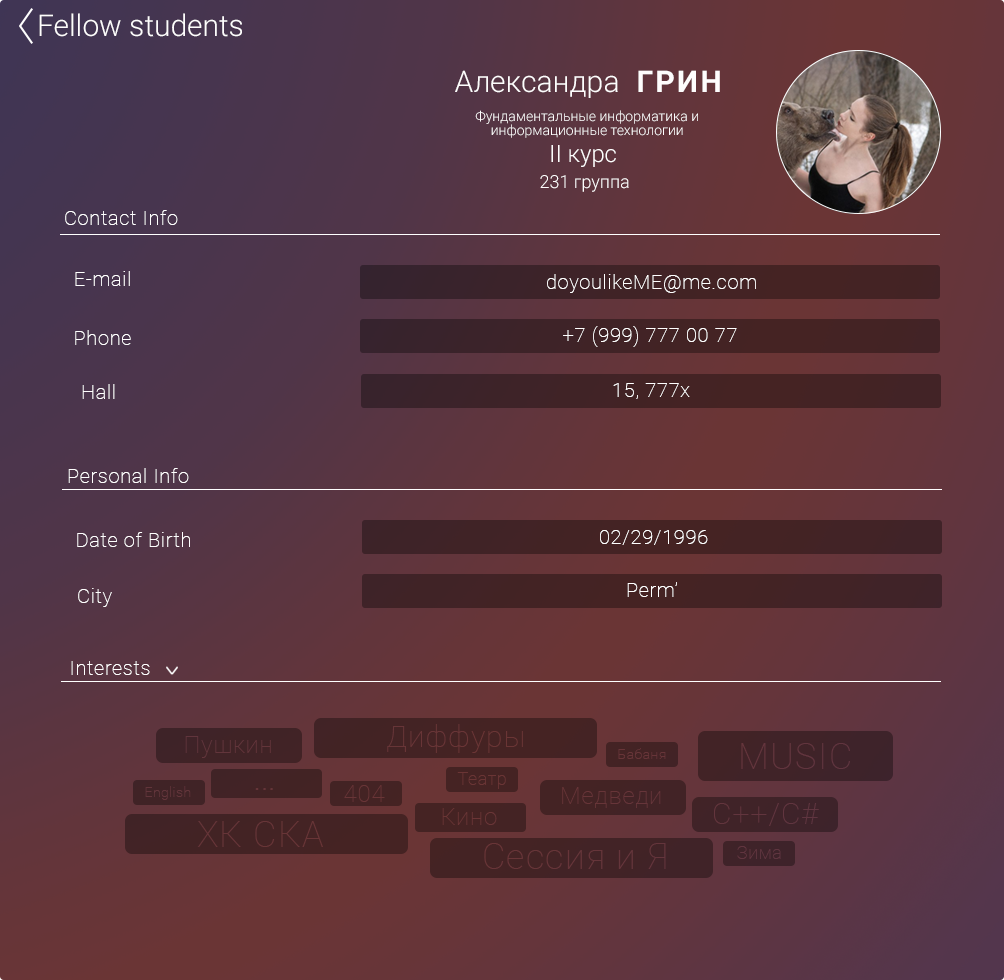
<style>
.page{position:relative;width:1004px;height:980px}
.page>*{position:absolute;margin:0}
.t1{font:30px "Roboto-Light";color:#fefdfd}
.t2{font:30px "Roboto-Bold";letter-spacing:0.075em;color:#fefdfd}
.t3{font:14px/14px "Roboto-Light";color:#fefdfd}
.t4{font:24px "Roboto-Light";color:#fefdfd}
.t5{font:18px "Roboto-Light";color:#fefdfd}
.t6{font:20px "Roboto-Thin";letter-spacing:0.035em;color:#ffffff}
</style>
<div class="page">
<p class="t1" style="left:39px;top:13px;width:203px;height:24px">Fellow students</p>
<p class="t1" style="left:455px;top:70px;width:163px;height:28px">Александра</p>
<p class="t2" style="left:638px;top:70px;width:82px;height:22px">ГРИН</p>
<p class="t3" style="left:475px;top:110px;width:223px;height:28px;text-align:center">Фундаментальные информатика и информационные технологии</p>
<p class="t4" style="left:551px;top:145px;width:65px;height:22px">II курс</p>
<p class="t5" style="left:540px;top:175px;width:89px;height:17px">231 группа</p>
<p class="t6" style="left:65px;top:210px;width:113px;height:15px">Contact Info</p>
<p class="t6" style="left:75px;top:271px;width:55px;height:15px">E-mail</p>
<p class="t6" style="left:547px;top:274px;width:209px;height:19px">doyoulikeME@me.com</p>
<p class="t6" style="left:563px;top:326px;width:174px;height:21px">+7 (999) 777 00 77</p>
<p class="t6" style="left:75px;top:330px;width:56px;height:15px">Phone</p>
<p class="t6" style="left:82px;top:384px;width:33px;height:15px">Hall</p>
<p class="t6" style="left:613px;top:383px;width:77px;height:16px">15, 777x</p>
<p class="t6" style="left:68px;top:468px;width:121px;height:15px">Personal Info</p>
<p class="t6" style="left:77px;top:532px;width:113px;height:15px">Date of Birth</p>
<p class="t6" style="left:600px;top:530px;width:108px;height:15px">02/29/1996</p>
<p class="t6" style="left:627px;top:582px;width:50px;height:15px">Perm’</p>
<p class="t6" style="left:78px;top:588px;width:34px;height:19px">City</p>
<p class="t6" style="left:71px;top:661px;width:79px;height:14px">Interests</p>
</div>
